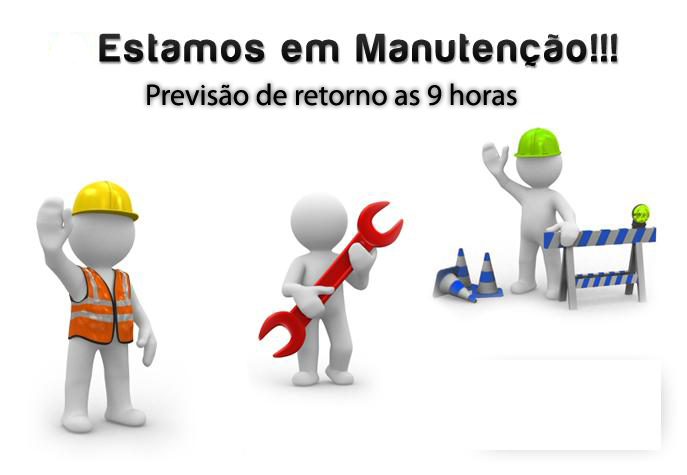
<style>
.page{position:relative;width:687px;height:475px;background:#ffffff}
.page>*{position:absolute;margin:0}
.t1{font:30px "MyriadPro-Regular";color:#000000}
</style>
<div class="page">
<p class="t1" style="left:147px;top:83px;width:370px;height:23px">Previsão de retorno as 9 horas</p>
</div>
